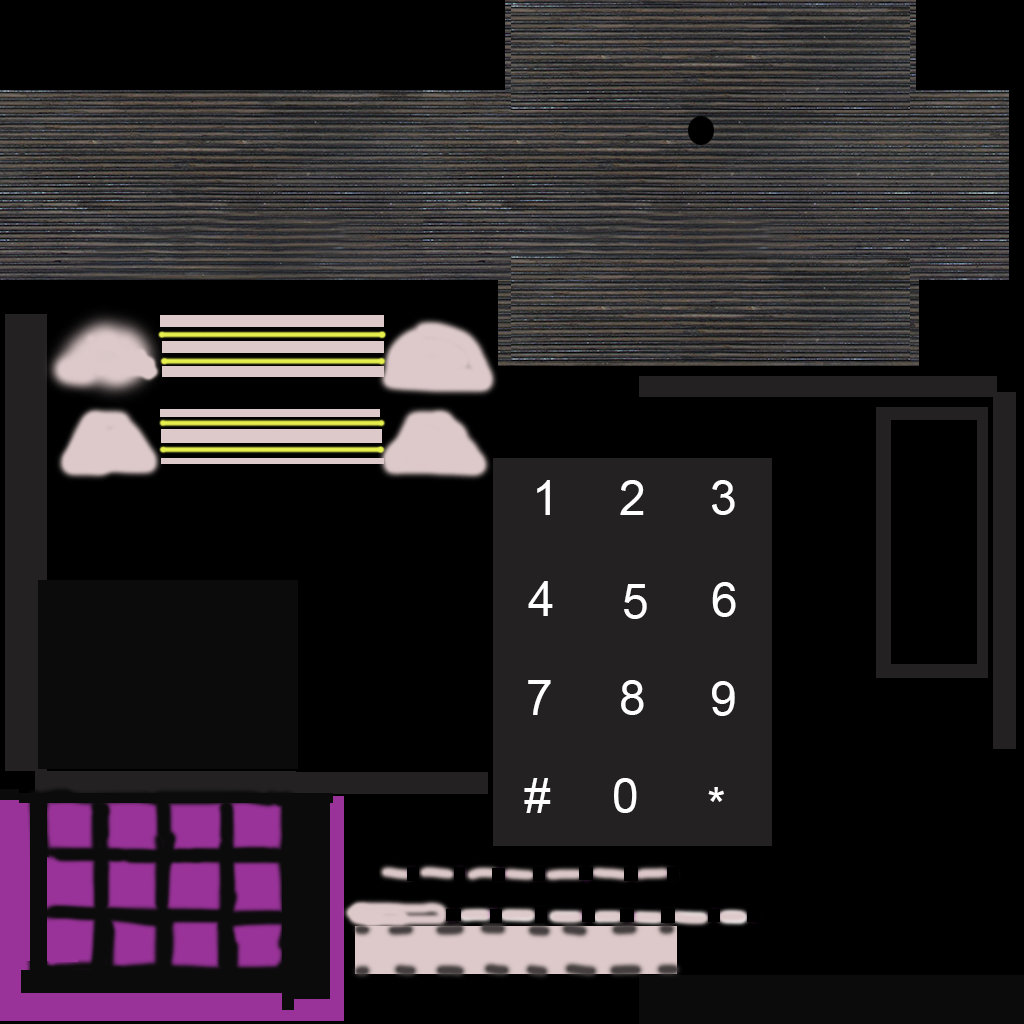
<style>
.page{position:relative;width:1024px;height:1024px;background:#000000}
.page>*{position:absolute;margin:0}
.t1{font:48px "ArialMT";color:#ffffff}
</style>
<div class="page">
<p class="t1" style="left:537px;top:480px;width:13px;height:35px">1</p>
<p class="t1" style="left:620px;top:480px;width:24px;height:35px">2</p>
<p class="t1" style="left:712px;top:480px;width:23px;height:35px">3</p>
<p class="t1" style="left:528px;top:581px;width:25px;height:35px">4</p>
<p class="t1" style="left:712px;top:582px;width:24px;height:35px">6</p>
<p class="t1" style="left:624px;top:584px;width:23px;height:35px">5</p>
<p class="t1" style="left:528px;top:680px;width:23px;height:35px">7</p>
<p class="t1" style="left:621px;top:680px;width:23px;height:35px">8</p>
<p class="t1" style="left:712px;top:681px;width:23px;height:35px">9</p>
<p class="t1" style="left:524px;top:778px;width:27px;height:35px">#</p>
<p class="t1" style="left:614px;top:778px;width:23px;height:35px">0</p>
<p class="t1" style="left:708px;top:787px;width:16px;height:15px">*</p>
</div>
